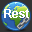
<style>
.page{position:relative;width:32px;height:32px;background:#333333}
.page>*{position:absolute;margin:0}
.t1{font:12px "Arial-BoldMT";color:#ffffff}
</style>
<div class="page">
<p class="t1" style="left:4px;top:9px;width:25px;height:9px">Rest</p>
</div>
